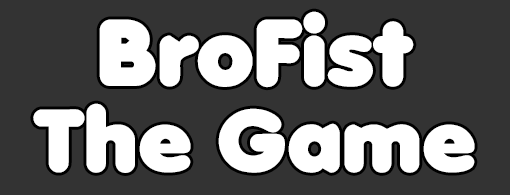
<style>
.page{position:relative;width:510px;height:195px;background:#333333}
.page>*{position:absolute;margin:0}
.t1{font:92.4px "Debussy";color:#ffffff}
.t2{font:87px "Debussy";color:#ffffff}
</style>
<div class="page">
<p class="t1" style="left:99px;top:11px;width:315px;height:77px">BroFist</p>
<p class="t2" style="left:33px;top:103px;width:442px;height:70px">The Game</p>
</div>
